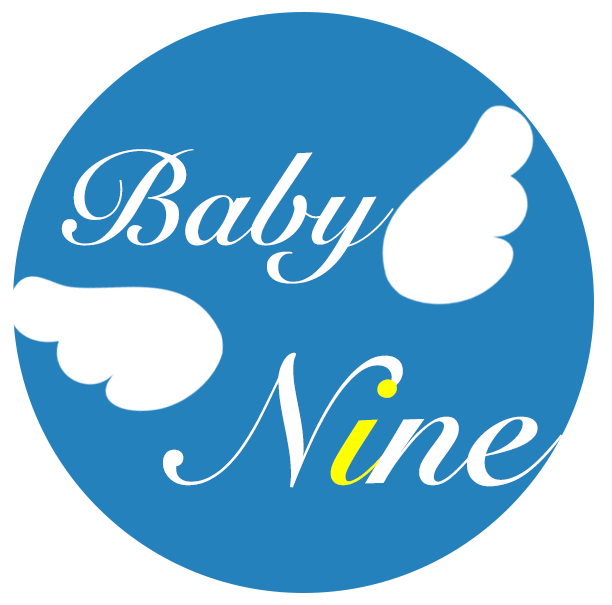
<style>
.page{position:relative;width:612px;height:605px;background:#2581bc}
.page>*{position:absolute;margin:0}
.t1{font:130px "SnellRoundhand-Bold";color:#ffffff}
.t2{font:180.5px "SnellRoundhand-Bold";color:#ffffff}
.t3{font:180.5px "SnellRoundhand-Bold";color:#ffff00}
</style>
<div class="page">
<p class="t1" style="left:61px;top:149px;width:333px;height:135px">Baby</p>
<p class="t2" style="left:163px;top:352px;width:400px;height:136px">N<span class="t3">i</span>ne</p>
</div>
